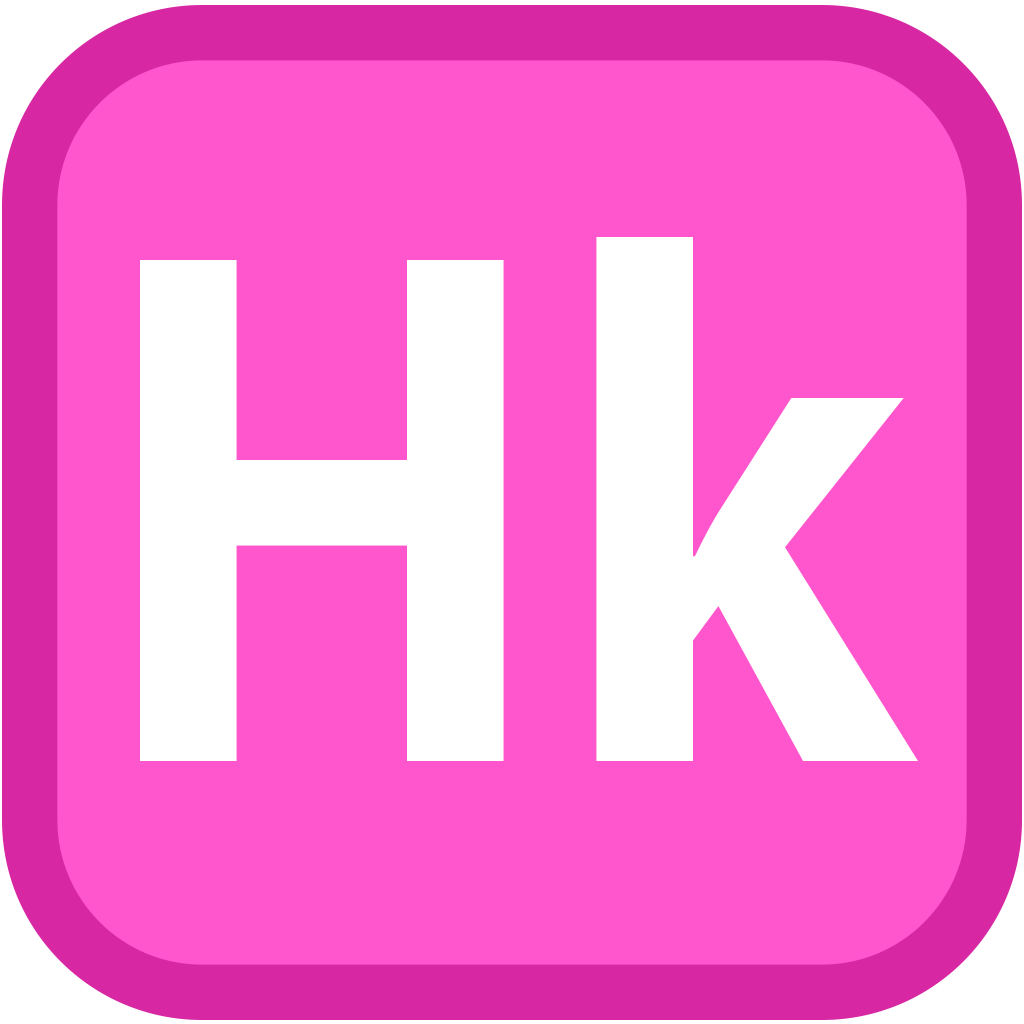
<style>
.page{position:relative;width:1024px;height:1024px;background:#ff55cd}
.page>*{position:absolute;margin:0}
.t1{font:651.9px "KozGoPr6N-Bold";color:#ffffff}
</style>
<div class="page">
<p class="t1" style="left:140px;top:237px;width:778px;height:524px">Hk</p>
</div>
